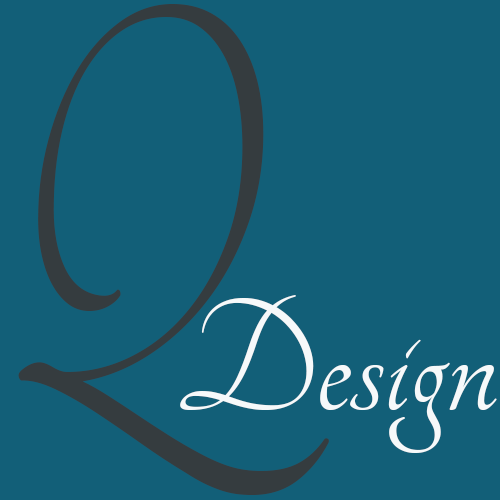
<style>
.page{position:relative;width:500px;height:500px;background:#125f78}
.page>*{position:absolute;margin:0}
.t1{font:604.6px "Tangerine-Regular";color:#353c3f;scale:0.73 1}
.t2{font:174.2px "Tangerine-Regular";color:#f6f9fa}
</style>
<div class="page">
<p class="t1" style="left:18px;top:4px;width:311px;height:491px">Q</p>
<p class="t2" style="left:180px;top:295px;width:317px;height:158px">Design</p>
</div>
